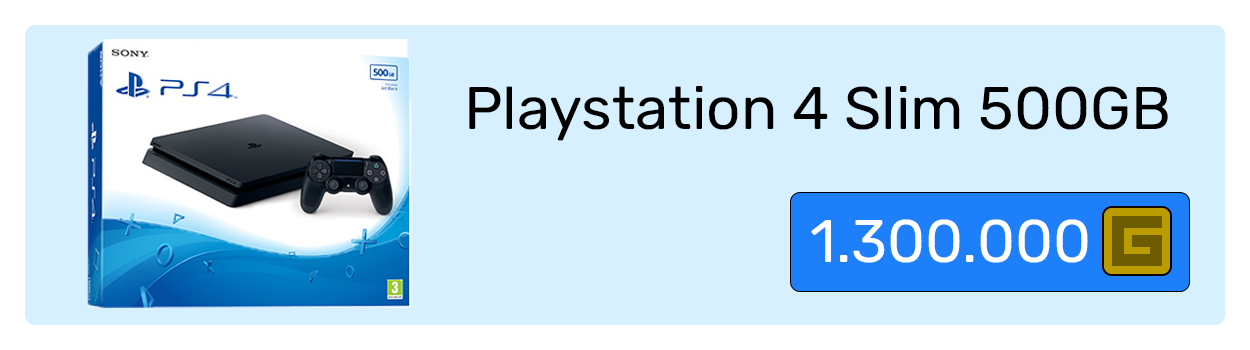
<style>
.page{position:relative;width:1250px;height:350px;background:#d7f0ff}
.page>*{position:absolute;margin:0}
.t1{font:60px "Rubik-Regular";color:#000000}
.t2{font:60px "Rubik-Regular";color:#ffffff}
</style>
<div class="page">
<p class="t1" style="left:469px;top:86px;width:699px;height:55px">Playstation 4 Slim 500GB</p>
<p class="t2" style="left:811px;top:219px;width:277px;height:44px">1.300.000</p>
</div>
